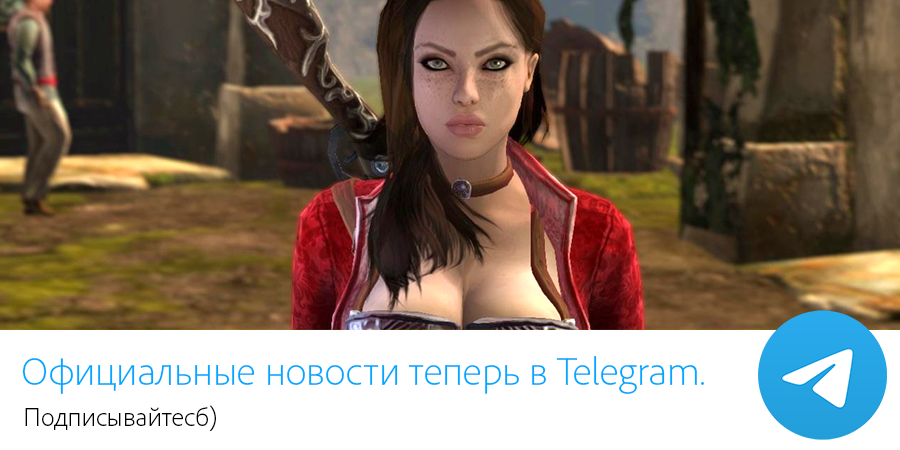
<style>
.page{position:relative;width:900px;height:450px;background:#ffffff}
.page>*{position:absolute;margin:0}
.t1{font:40px "AdobeClean-Light";color:#00a8ff}
.t2{font:26.7px "AdobeClean-Light";color:#000000}
</style>
<div class="page">
<p class="t1" style="left:22px;top:356px;width:682px;height:38px">Официальные новости теперь в Telegram.</p>
<p class="t2" style="left:25px;top:405px;width:191px;height:26px">Подписывайтесб)</p>
</div>
